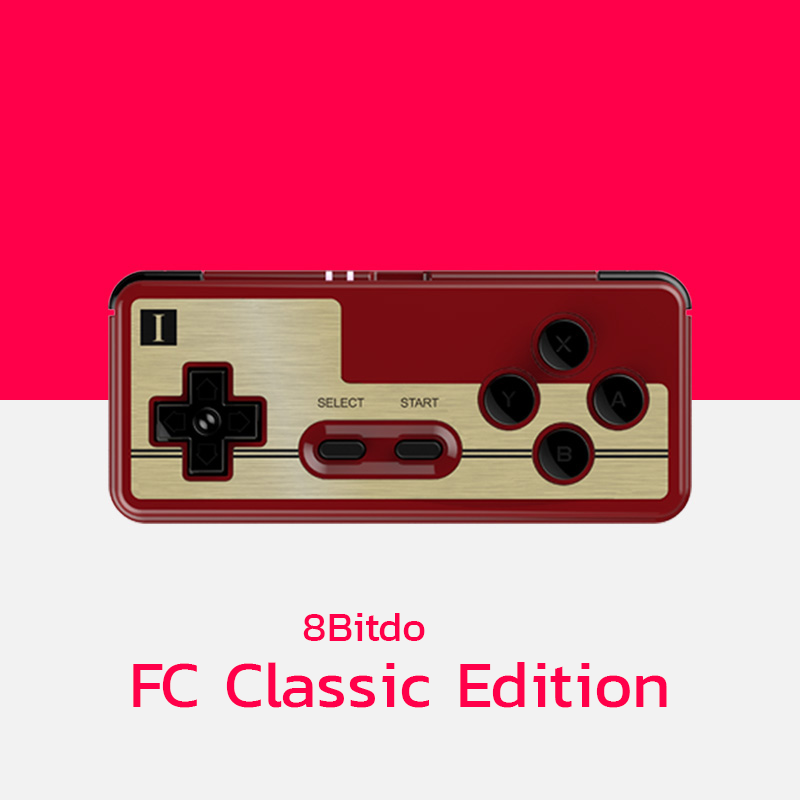
<style>
.page{position:relative;width:800px;height:800px;background:#ff004a}
.page>*{position:absolute;margin:0}
.t1{font:41.7px "Kanit-Regular";color:#ff004a}
.t2{font:66.8px "Kanit-Regular";color:#ff004a}
</style>
<div class="page">
<p class="t1" style="left:303px;top:613px;width:122px;height:28px">8Bitdo</p>
<p class="t2" style="left:133px;top:662px;width:534px;height:46px">FC Classic Edition</p>
</div>
